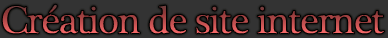
<style>
.page{position:relative;width:388px;height:38px;background:#333333}
.page>*{position:absolute;margin:0}
.t1{font:40px "PlantagenetCherokee";letter-spacing:-0.07em;font-weight:bold}
</style>
<div class="page">
<p class="t1" style="left:1px;top:3px;width:384px;height:32px">Création de site internet</p>
</div>
